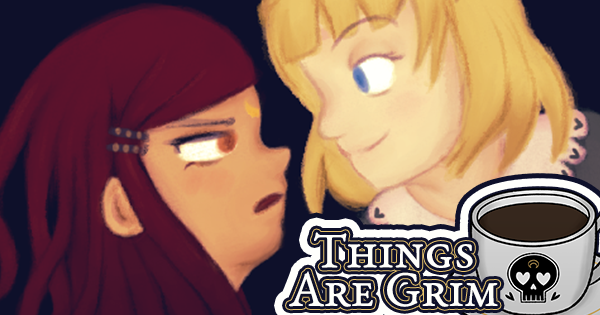
<style>
.page{position:relative;width:600px;height:315px}
.page>*{position:absolute;margin:0}
.t1{font:49.3px/38.7px "EBGaramond-Regular";letter-spacing:-0.02em;color:#ffffff;font-variant:small-caps;font-weight:bold}
</style>
<div class="page">
<p class="t1" style="left:289px;top:232px;width:209px;height:75px;text-align:center">Things<br>Are Grim</p>
</div>
